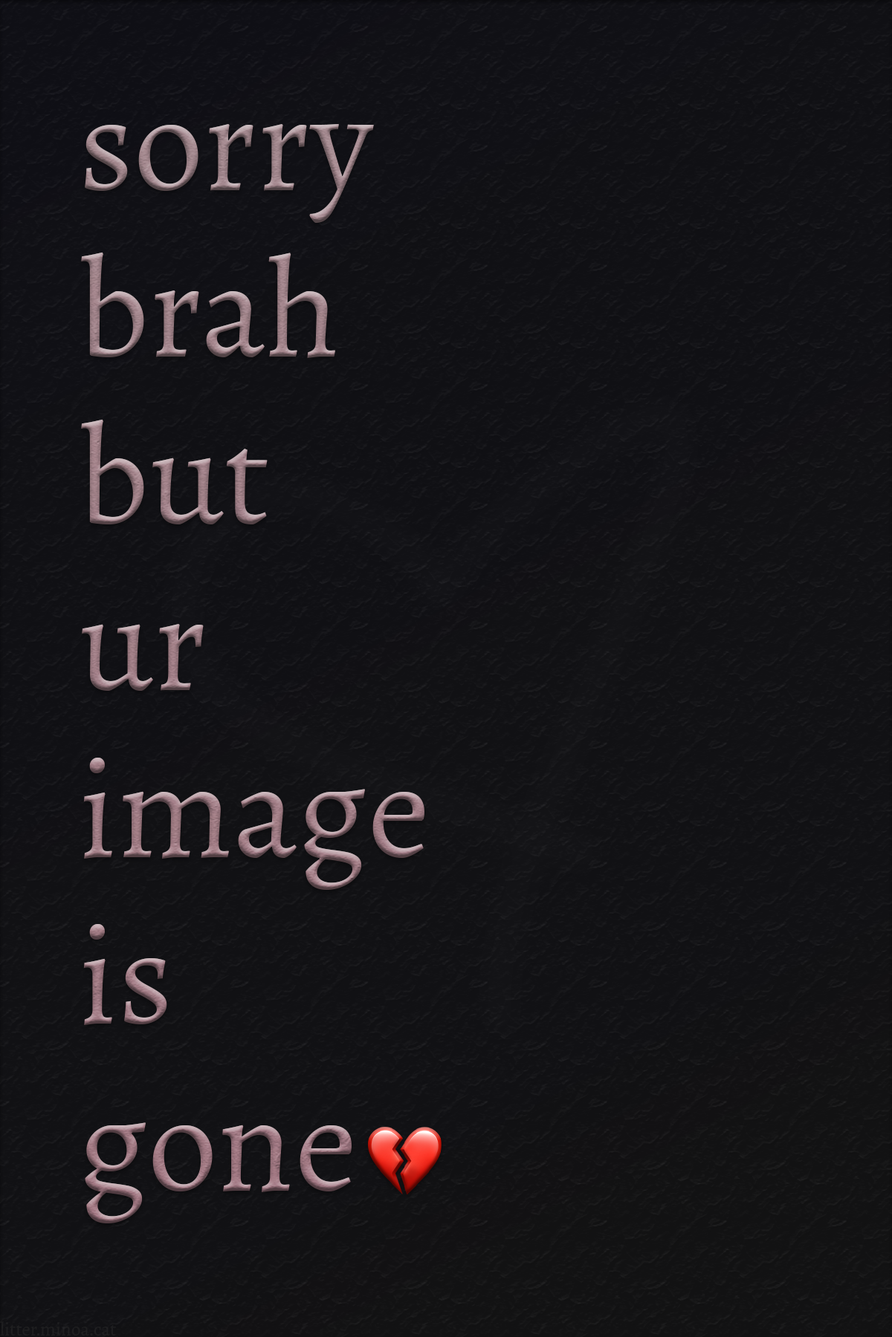
<style>
.page{position:relative;width:892px;height:1337px}
.page>*{position:absolute;margin:0}
.t1{font:139px "Sahitya-Regular"}
.t2{font:18.6px "Sahitya-Regular";color:#1e1e1f}
</style>
<div class="page">
<p class="t1" style="left:81px;top:123px;width:343px;height:1101px">sorry<br>brah<br>but<br>ur<br>image<br>is<br>gone</p>
<p class="t2" style="left:0px;top:1322px;width:116px;height:15px">litter.minoa.cat</p>
</div>
